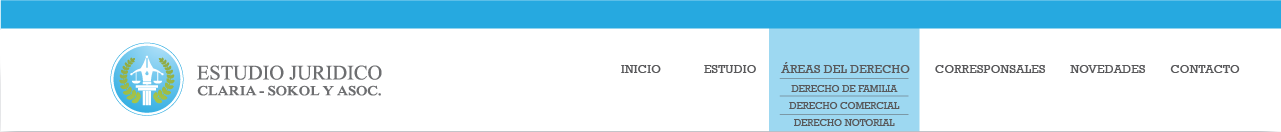
<style>
.page{position:relative;width:1281px;height:132px;background:#ffffff}
.page>*{position:absolute;margin:0}
.t1{font:12px "Rockwell";letter-spacing:0.02em;color:#58585a}
.t2{font:9.5px "Rockwell";letter-spacing:0.03em;color:#58585a}
</style>
<div class="page">
<p class="t1" style="left:621px;top:65px;width:40px;height:8px">INICIO</p>
<p class="t1" style="left:704px;top:65px;width:52px;height:8px">ESTUDIO</p>
<p class="t1" style="left:781px;top:62px;width:129px;height:11px">ÁREAS DEL DERECHO</p>
<p class="t1" style="left:935px;top:65px;width:111px;height:8px">CORRESPONSALES</p>
<p class="t1" style="left:1070px;top:65px;width:76px;height:8px">NOVEDADES</p>
<p class="t1" style="left:1170px;top:65px;width:70px;height:8px">CONTACTO</p>
<p class="t2" style="left:791px;top:85px;width:107px;height:7px">DERECHO DE FAMILIA</p>
<p class="t2" style="left:789px;top:102px;width:111px;height:7px">DERECHO COMERCIAL</p>
<p class="t2" style="left:794px;top:119px;width:101px;height:7px">DERECHO NOTORIAL</p>
</div>
